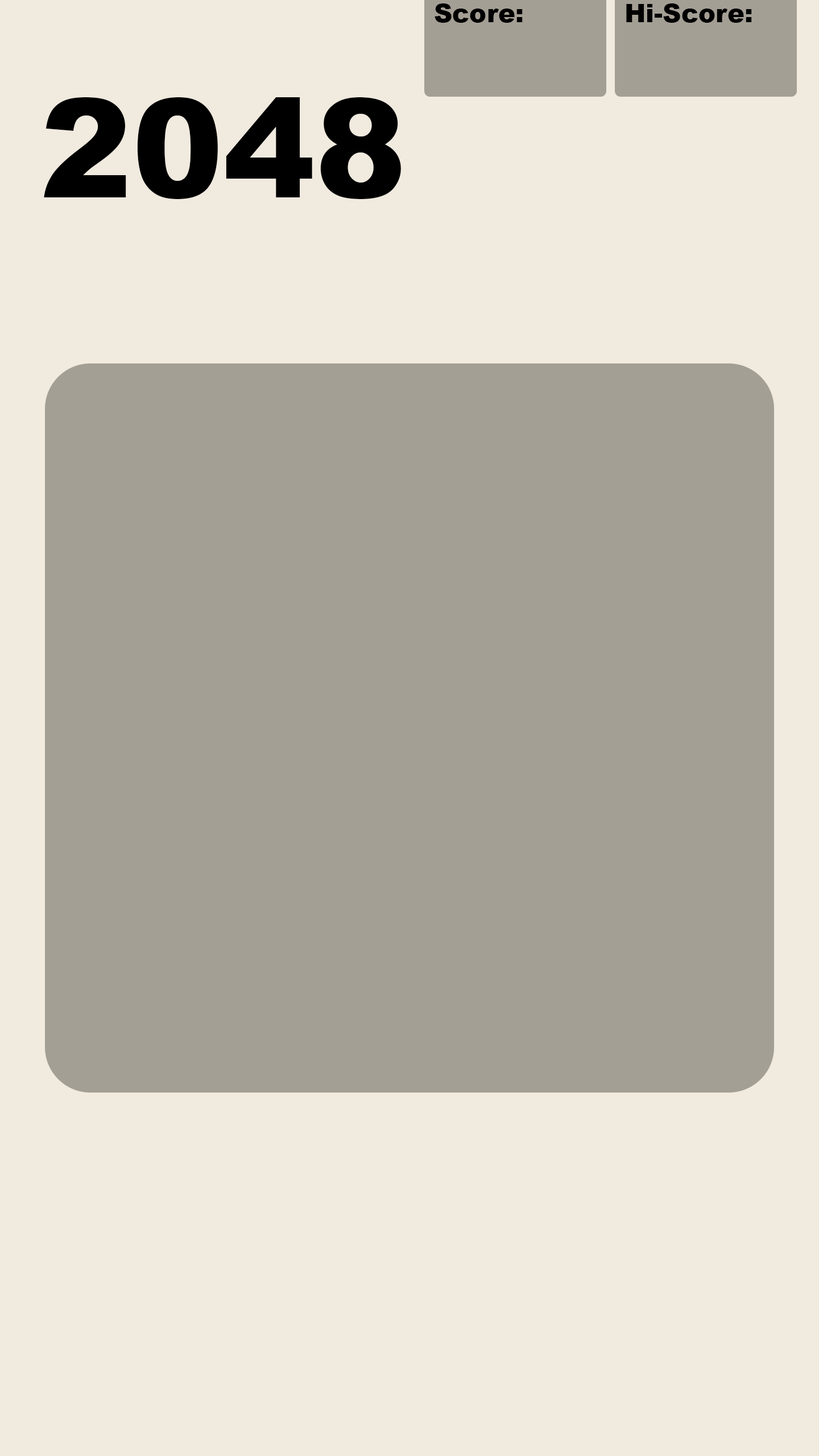
<style>
.page{position:relative;width:819px;height:1456px;background:#f0eadf}
.page>*{position:absolute;margin:0}
.t1{font:25px "Arial-Black";color:#000000}
.t2{font:137.1px "Arial-Black";color:#000000}
</style>
<div class="page">
<p class="t1" style="left:435px;top:3px;width:88px;height:20px">Score:</p>
<p class="t1" style="left:626px;top:3px;width:126px;height:20px">Hi-Score:</p>
<p class="t2" style="left:44px;top:97px;width:357px;height:102px">2048</p>
</div>
